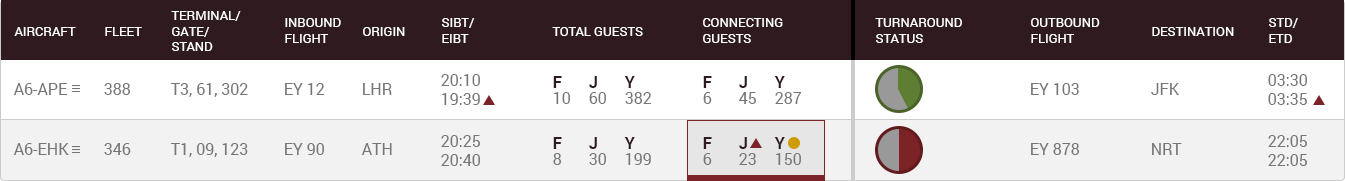
<style>
.page{position:relative;width:1345px;height:181px;background:#ffffff}
.page>*{position:absolute;margin:0}
.t1{font:13px "Roboto-Regular";color:#ffffff;text-transform:uppercase}
.t2{font:16px "Roboto-Regular";color:#767676}
.t3{font:16px/16px "Roboto-Regular";color:#767676}
.t4{font:16px/16px "Roboto-Bold";color:#2f1b1f}
</style>
<div class="page">
<p class="t1" style="left:171px;top:11px;width:70px;height:40px">Terminal/<br>Gate/<br>Stand</p>
<p class="t1" style="left:14px;top:27px;width:62px;height:9px">AirCraft</p>
<p class="t1" style="left:105px;top:27px;width:37px;height:9px">Fleet</p>
<p class="t1" style="left:285px;top:18px;width:56px;height:25px">Inbound<br>Flight</p>
<p class="t1" style="left:363px;top:27px;width:42px;height:9px">Origin</p>
<p class="t1" style="left:442px;top:18px;width:33px;height:25px">SIBT/<br>EIBT</p>
<p class="t1" style="left:552px;top:27px;width:91px;height:9px">Total Guests</p>
<p class="t1" style="left:703px;top:18px;width:80px;height:25px">Connecting<br>Guests</p>
<p class="t1" style="left:875px;top:18px;width:87px;height:25px">Turnaround<br>Status</p>
<p class="t1" style="left:1031px;top:18px;width:69px;height:25px">Outbound<br>Flight</p>
<p class="t1" style="left:1152px;top:27px;width:82px;height:9px">Destination</p>
<p class="t1" style="left:1269px;top:18px;width:29px;height:25px">STD/<br>ETD</p>
<p class="t2" style="left:441px;top:74px;width:39px;height:31px">20:10<br>19:39</p>
<p class="t3" style="left:553px;top:76px;width:99px;height:28px"><span class="t4">F J Y<br></span>10 60 382</p>
<p class="t3" style="left:703px;top:76px;width:99px;height:28px"><span class="t4">F J Y<br></span>6 45 287</p>
<p class="t2" style="left:1268px;top:74px;width:39px;height:31px">03:30<br>03:35</p>
<p class="t2" style="left:13px;top:83px;width:55px;height:12px">A6-APE</p>
<p class="t2" style="left:104px;top:83px;width:27px;height:12px">388</p>
<p class="t2" style="left:170px;top:83px;width:78px;height:14px">T3, 61, 302</p>
<p class="t2" style="left:285px;top:83px;width:40px;height:12px">EY 12</p>
<p class="t2" style="left:363px;top:83px;width:29px;height:12px">LHR</p>
<p class="t2" style="left:1031px;top:83px;width:48px;height:12px">EY 103</p>
<p class="t2" style="left:1151px;top:83px;width:28px;height:12px">JFK</p>
<p class="t2" style="left:441px;top:135px;width:39px;height:31px">20:25<br>20:40</p>
<p class="t3" style="left:553px;top:137px;width:98px;height:28px"><span class="t4">F J Y<br></span>8 30 199</p>
<p class="t3" style="left:703px;top:137px;width:98px;height:28px"><span class="t4">F J Y<br></span>6 23 150</p>
<p class="t2" style="left:1268px;top:135px;width:39px;height:31px">22:05<br>22:05</p>
<p class="t2" style="left:13px;top:143px;width:56px;height:12px">A6-EHK</p>
<p class="t2" style="left:104px;top:143px;width:27px;height:12px">346</p>
<p class="t2" style="left:170px;top:143px;width:78px;height:14px">T1, 09, 123</p>
<p class="t2" style="left:285px;top:143px;width:39px;height:12px">EY 90</p>
<p class="t2" style="left:361px;top:143px;width:31px;height:12px">ATH</p>
<p class="t2" style="left:1031px;top:143px;width:49px;height:12px">EY 878</p>
<p class="t2" style="left:1152px;top:143px;width:30px;height:12px">NRT</p>
</div>
